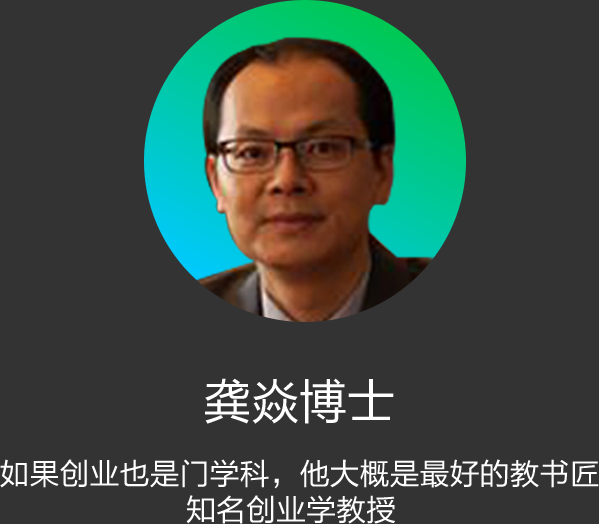
<style>
.page{position:relative;width:599px;height:524px;background:#333333}
.page>*{position:absolute;margin:0}
.t1{font:48px "FZLTHK--GBK1-0";color:#ffffff}
.t2{font:30px/36px "FZLTHK--GBK1-0";color:#ffffff}
</style>
<div class="page">
<p class="t1" style="left:205px;top:378px;width:189px;height:46px">龚焱博士</p>
<p class="t2" style="left:0px;top:459px;width:599px;height:65px;text-align:center">如果创业也是门学科，他大概是最好的教书匠<br>知名创业学教授</p>
</div>
